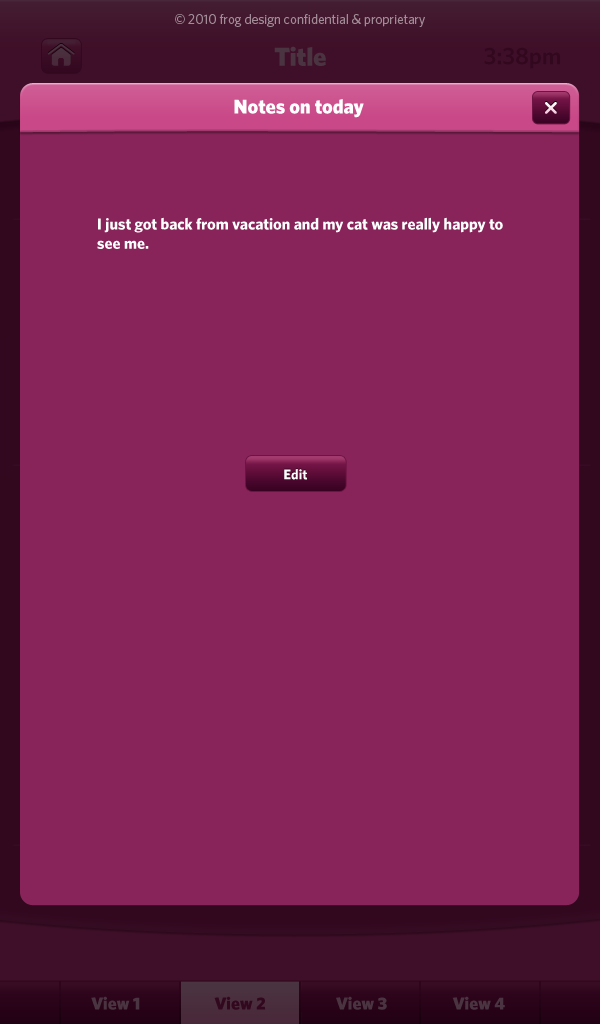
<style>
.page{position:relative;width:600px;height:1024px;background:#882459}
.page>*{position:absolute;margin:0}
.t1{font:13.3px "Whitney-Book";color:#a18b97}
.t2{font:20px "Whitney-Black";color:#f0f0f0}
.t3{font:16px "Whitney-Bold";color:#ffffff}
.t4{font:14px "Whitney-Bold";color:#ffffff}
</style>
<div class="page">
<p class="t1" style="left:175px;top:14px;width:250px;height:13px">© 2010 frog design confidential &amp; proprietary</p>
<p class="t2" style="left:234px;top:99px;width:130px;height:19px">Notes on today</p>
<p class="t3" style="left:97px;top:217px;width:406px;height:32px">I just got back from vacation and my cat was really happy to see me.</p>
<p class="t4" style="left:284px;top:469px;width:23px;height:11px">Edit</p>
</div>
